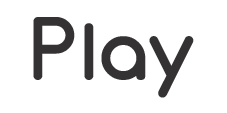
<style>
.page{position:relative;width:227px;height:113px;background:#ffffff}
.page>*{position:absolute;margin:0}
.t1{font:90px "Neon80s";color:#343232}
</style>
<div class="page">
<p class="t1" style="left:33px;top:17px;width:161px;height:81px">Play</p>
</div>
